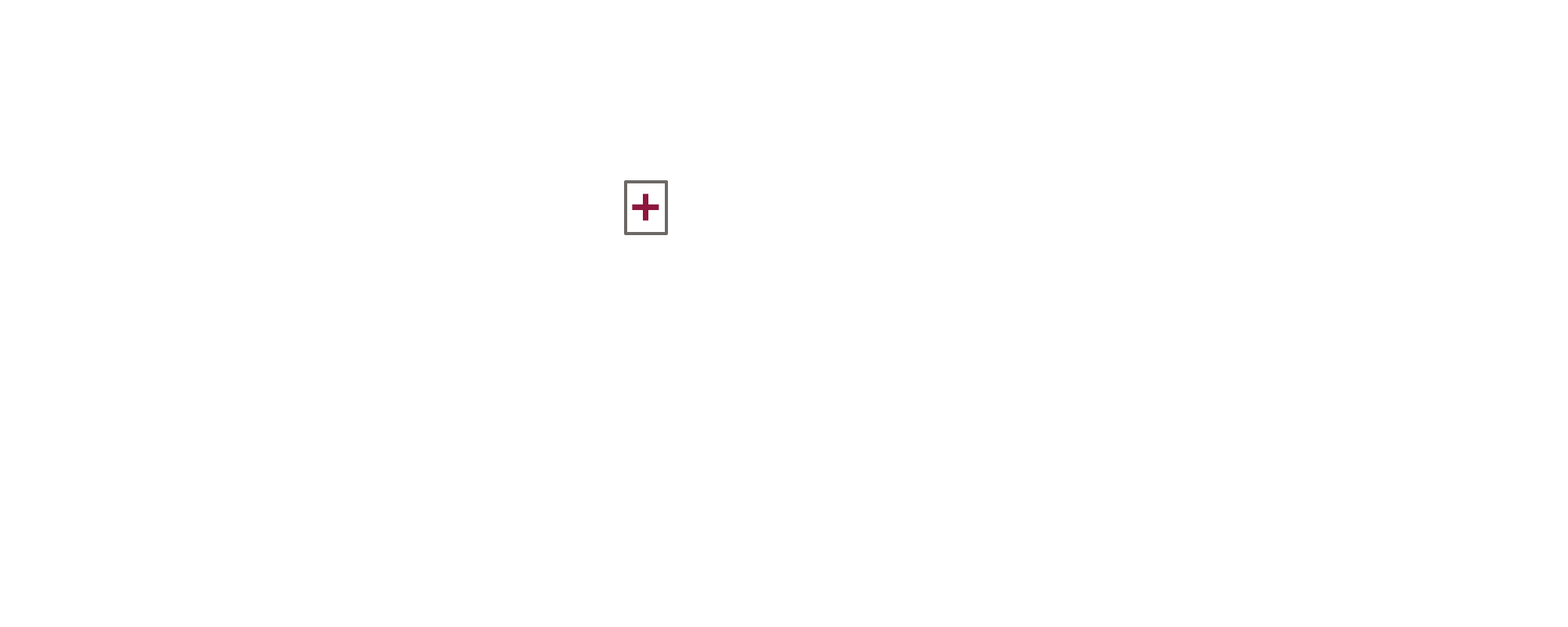
<style>
.page{position:relative;width:1568px;height:627px;background:#ffffff}
.page>*{position:absolute;margin:0}
.t1{font:56.4px "MicrosoftPhagsPa-Bold";color:#8e173d}
</style>
<div class="page">
<p class="t1" style="left:632px;top:194px;width:27px;height:27px">+</p>
</div>
